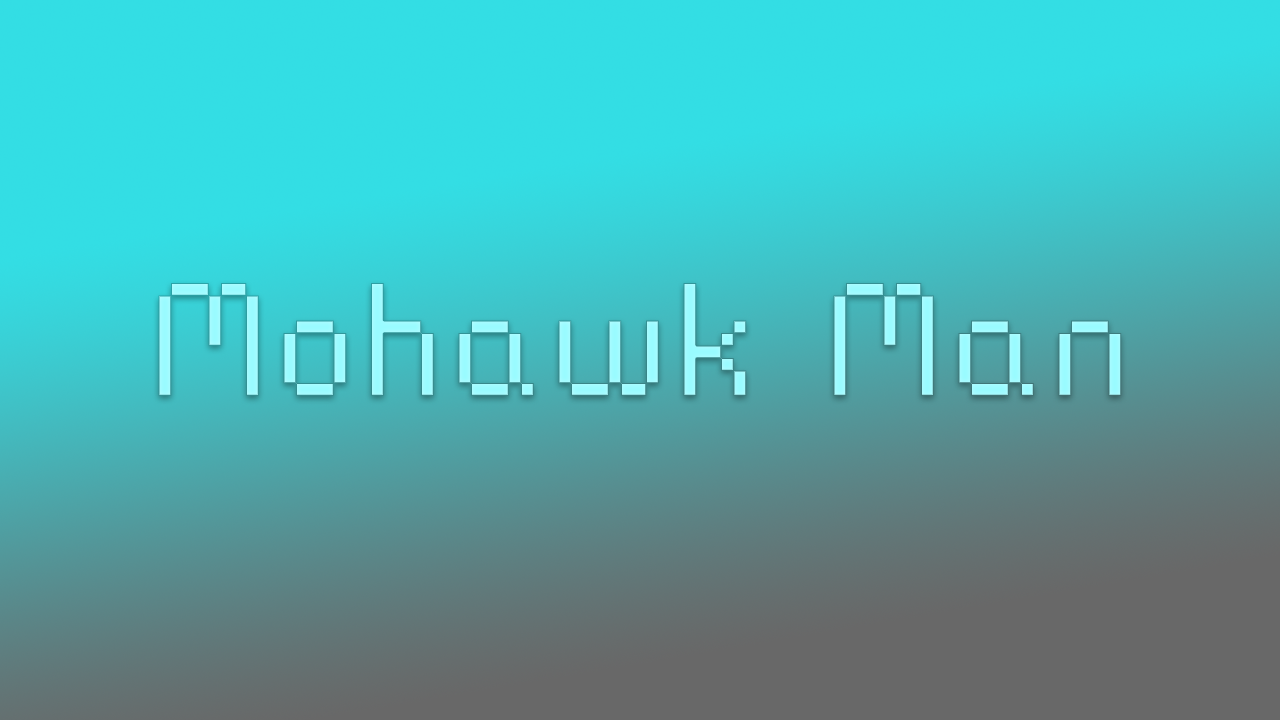
<style>
.page{position:relative;width:1280px;height:720px}
.page>*{position:absolute;margin:0}
.t1{font:200px "rainyhearts";color:#99fbff}
</style>
<div class="page">
<p class="t1" style="left:158px;top:283px;width:964px;height:113px">Mohawk Man</p>
</div>
